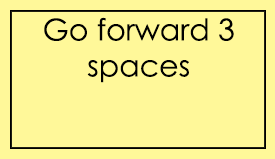
<style>
.page{position:relative;width:275px;height:159px;background:#fff899}
.page>*{position:absolute;margin:0}
.t1{font:30px "CenturyGothic";color:#000000}
</style>
<div class="page">
<p class="t1" style="left:44px;top:17px;width:190px;height:66px;text-align:center">Go forward 3 spaces</p>
</div>
